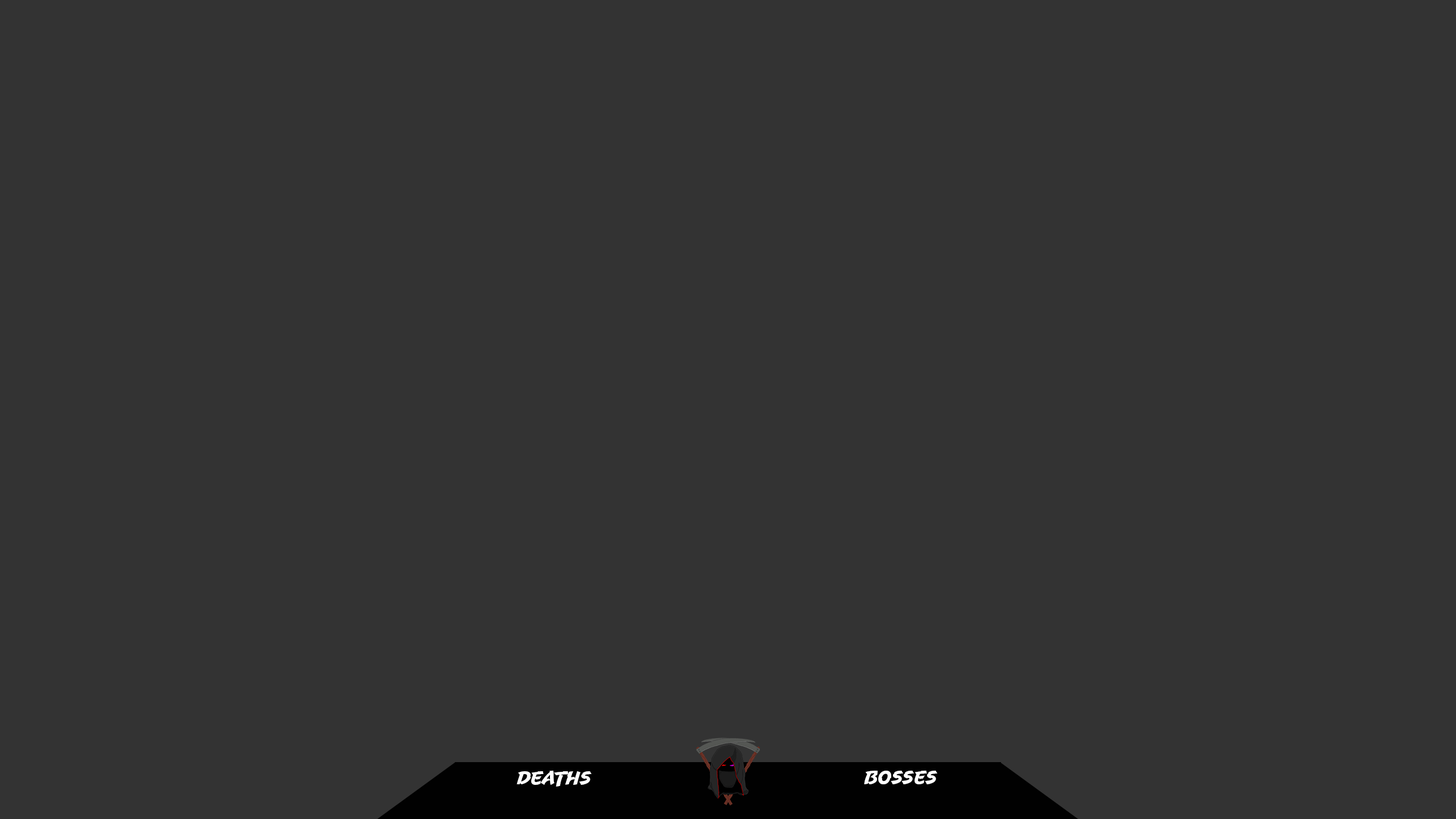
<style>
.page{position:relative;width:1456px;height:819px;background:#333333}
.page>*{position:absolute;margin:0}
.t1{font:19px "UppercutAngle";color:#ffffff}
</style>
<div class="page">
<p class="t1" style="left:516px;top:771px;width:75px;height:16px">Deaths</p>
<p class="t1" style="left:864px;top:771px;width:73px;height:13px">Bosses</p>
</div>
